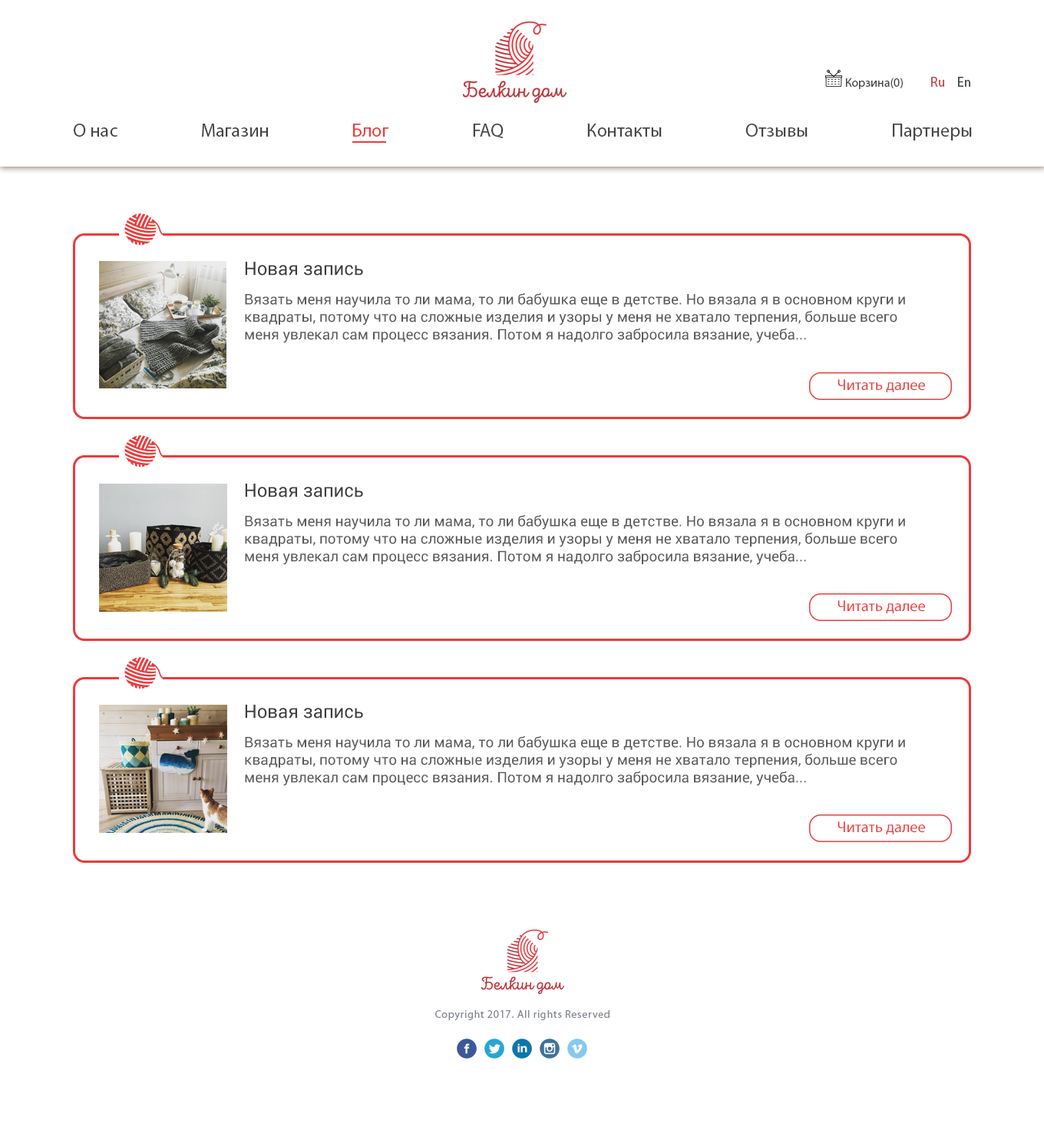
<style>
.page{position:relative;width:1044px;height:1143px;background:#ffffff}
.page>*{position:absolute;margin:0}
.t1{font:18.4px "Roboto-Regular";color:#3e3e3e}
.t2{font:14.6px/13.8px "Roboto-Regular";color:#595959}
.t3{font:15.6px "MyriadPro-Regular";color:#eb3b3b}
</style>
<div class="page">
<p class="t1" style="left:245px;top:262px;width:118px;height:13px">Новая запись</p>
<p class="t2" style="left:245px;top:293px;width:660px;height:50px">Вязать меня научила то ли мама, то ли бабушка еще в детстве. Но вязала я в основном круги и <br>квадраты, потому что на сложные изделия и узоры у меня не хватало терпения, больше всего <br>меня увлекал сам процесс вязания. Потом я надолго забросила вязание, учеба...</p>
<p class="t3" style="left:837px;top:379px;width:88px;height:13px">Читать далее</p>
<p class="t1" style="left:245px;top:483px;width:118px;height:14px">Новая запись</p>
<p class="t2" style="left:245px;top:515px;width:660px;height:50px">Вязать меня научила то ли мама, то ли бабушка еще в детстве. Но вязала я в основном круги и <br>квадраты, потому что на сложные изделия и узоры у меня не хватало терпения, больше всего <br>меня увлекал сам процесс вязания. Потом я надолго забросила вязание, учеба...</p>
<p class="t3" style="left:837px;top:600px;width:88px;height:13px">Читать далее</p>
<p class="t1" style="left:245px;top:704px;width:118px;height:14px">Новая запись</p>
<p class="t2" style="left:245px;top:736px;width:660px;height:50px">Вязать меня научила то ли мама, то ли бабушка еще в детстве. Но вязала я в основном круги и <br>квадраты, потому что на сложные изделия и узоры у меня не хватало терпения, больше всего <br>меня увлекал сам процесс вязания. Потом я надолго забросила вязание, учеба...</p>
<p class="t3" style="left:837px;top:821px;width:88px;height:13px">Читать далее</p>
</div>
